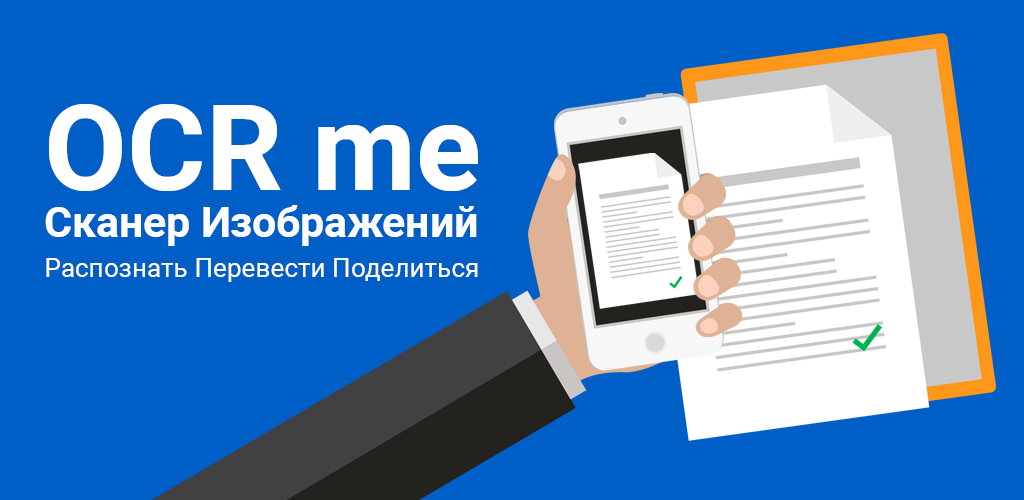
<style>
.page{position:relative;width:1024px;height:500px;background:#005fc6}
.page>*{position:absolute;margin:0}
.t1{font:42.4px/47.8px "Roboto-Bold";color:#ffffff}
.t2{font:119.8px/47.8px "Roboto-Bold";color:#ffffff}
.t3{font:26.1px "Roboto-Regular";color:#ffffff}
</style>
<div class="page">
<p class="t1" style="left:45px;top:104px;width:433px;height:142px"><span class="t2">OCR me <br></span>Сканер Изображений</p>
<p class="t3" style="left:46px;top:258px;width:432px;height:24px">Распознать Перевести Поделиться</p>
</div>
